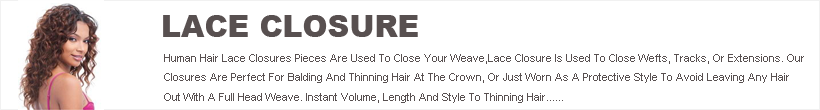
<style>
.page{position:relative;width:820px;height:110px;background:#ffffff}
.page>*{position:absolute;margin:0}
.t1{font:30px "Arial-Black";color:#585050}
.t2{font:11px "ArialMT";color:#585050}
</style>
<div class="page">
<p class="t1" style="left:163px;top:15px;width:255px;height:22px">LACE CLOSURE</p>
<p class="t2" style="left:164px;top:54px;width:640px;height:49px">Human Hair Lace Closures Pieces Are Used To Close Your Weave,Lace Closure Is Used To Close Wefts, Tracks, Or Extensions. Our<br>Closures Are Perfect For Balding And Thinning Hair At The Crown, Or Just Worn As A Protective Style To Avoid Leaving Any Hair<br>Out With A Full Head Weave. Instant Volume, Length And Style To Thinning Hair......</p>
</div>
